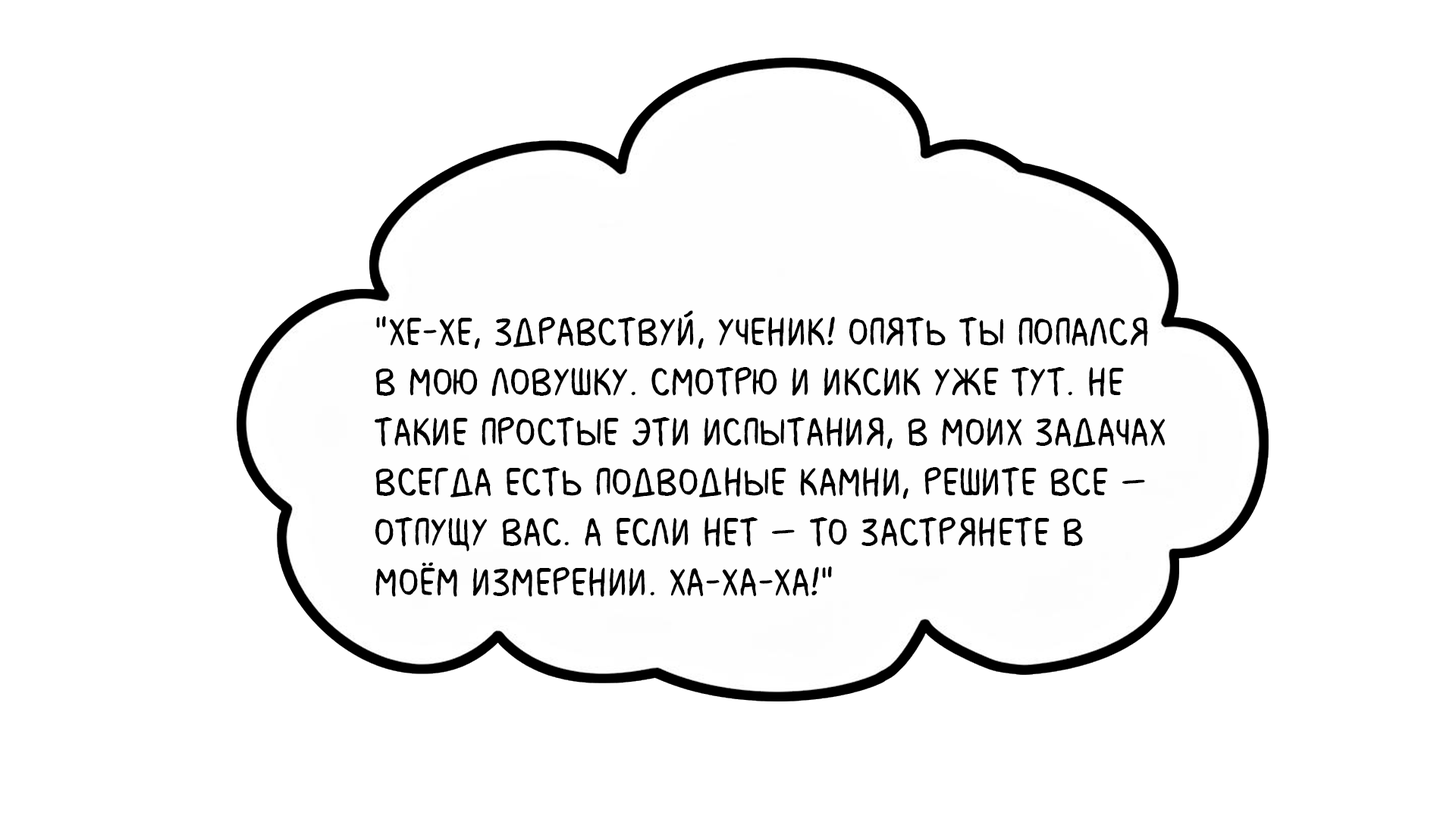
<style>
.page{position:relative;width:1456px;height:819px;background:#ffffff}
.page>*{position:absolute;margin:0}
.t1{font:41.7px "MilkMustacheBB";color:#000000}
</style>
<div class="page">
<p class="t1" style="left:375px;top:310px;width:791px;height:287px">"Хе-хе, здравствуй, ученик! Опять ты попался <br>в мою ловушку. Смотрю и Иксик уже тут. Не <br>такие простые эти испытания, в моих задачах <br>всегда есть подводные камни, решите все – <br>отпущу вас. А если нет – то застрянете в <br>моём измерении. Ха-ха-ха!"</p>
</div>
